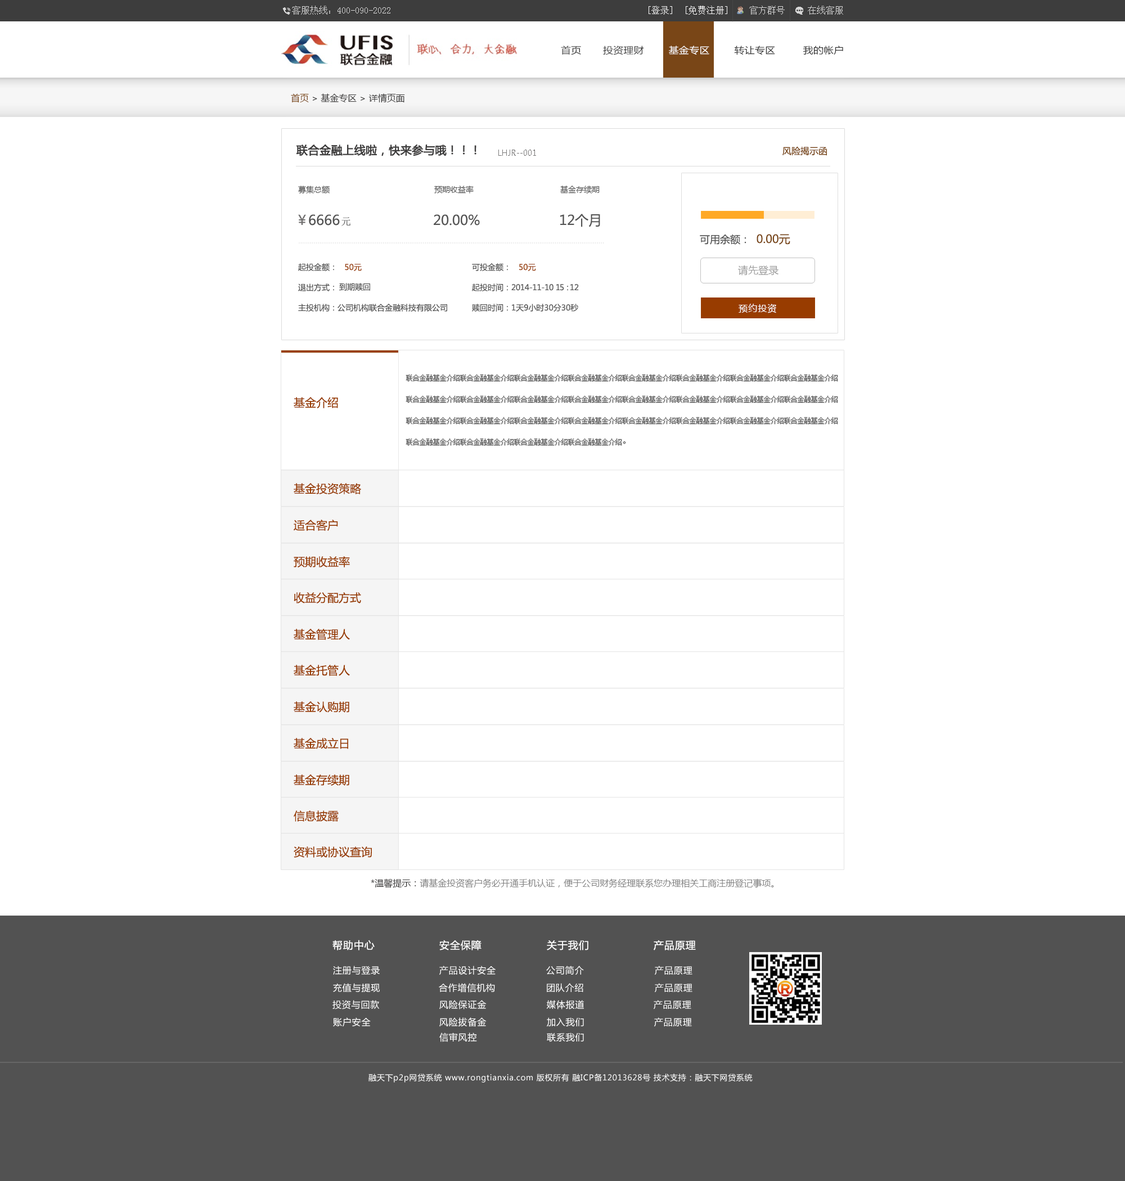
<style>
.page{position:relative;width:1125px;height:1181px;background:#ffffff}
.page>*{position:absolute;margin:0}
.t1{font:9px "SimSun";color:#d6d6d6}
.t2{font:9px "SimSun";color:#fefefe}
.t3{font:9px "SimSun";color:#fffefe}
.t4{font:9.1px "MicrosoftYaHei";letter-spacing:0.01em;color:#333333;scale:1.11 1}
.t5{font:9.1px "MicrosoftYaHei";letter-spacing:0.01em;color:#fffefe;scale:1.11 1}
.t6{font:9px "MicrosoftYaHei";color:#3b3a3a}
.t7{font:9px "MicrosoftYaHei";color:#794617}
.t8{font:11.2px "MicrosoftYaHei";color:#3d3c3c;font-weight:bold}
.t9{font:7.9px "MicrosoftYaHei";color:#797878}
.t10{font:7.9px "MicrosoftYaHei";color:#545454}
.t11{font:13.5px "MicrosoftYaHei";color:#706f6f}
.t12{font:13.5px "MicrosoftYaHei";color:#545454}
.t13{font:10.1px "SimSun";color:#545454}
.t14{font:10.1px "MicrosoftYaHei";color:#545454}
.t15{font:11.2px "MicrosoftYaHei";color:#794617}
.t16{font:7.9px "MicrosoftYaHei";color:#983c00}
.t17{font:10.1px "MicrosoftYaHei";color:#9d9d9d}
.t18{font:7.9px "MicrosoftYaHei";letter-spacing:-0.02em;color:#545454}
.t19{font:7.9px "MicrosoftYaHei";letter-spacing:-0.08em;color:#545454}
.t20{font:7.9px "MicrosoftYaHei";letter-spacing:-0.22em;color:#545454}
.t21{font:7.9px "MicrosoftYaHei";letter-spacing:0.12em;color:#545454}
.t22{font:9px "MicrosoftYaHei";letter-spacing:0.075em;color:#ffffff}
.t23{font:6.8px/21.4px "SimSun";color:#585858}
.t24{font:11.2px "MicrosoftYaHei";color:#983c00}
.t25{font:9px "MicrosoftYaHei";color:#858585}
.t26{font:9px "MicrosoftYaHei";color:#3a3939}
.t27{font:10.1px "MicrosoftYaHei";letter-spacing:0.05em;color:#ffffff}
.t28{font:9px "MicrosoftYaHei";letter-spacing:0.05em;color:#ffffff}
.t29{font:7.9px "MicrosoftYaHei";letter-spacing:0.05em;color:#ffffff}
</style>
<div class="page">
<p class="t1" style="left:292px;top:6px;width:98px;height:9px">客服热线：400-090-2022</p>
<p class="t2" style="left:649px;top:6px;width:23px;height:9px">[登录]</p>
<p class="t3" style="left:686px;top:6px;width:41px;height:9px">[免费注册]</p>
<p class="t1" style="left:749px;top:6px;width:94px;height:9px">官方群号     在线客服</p>
<p class="t4" style="left:561px;top:46px;width:282px;height:9px">首页       投资理财        <span class="t5">基金专区</span>        转让专区         我的帐户</p>
<p class="t6" style="left:291px;top:93px;width:114px;height:10px"><span class="t7">首页 </span>&gt; 基金专区 &gt; 详情页面</p>
<p class="t8" style="left:296px;top:144px;width:180px;height:12px">联合金融上线啦，快来参与哦！！！</p>
<p class="t9" style="left:498px;top:150px;width:38px;height:6px">LHJR--001</p>
<p class="t7" style="left:782px;top:146px;width:45px;height:10px">风险揭示函</p>
<p class="t10" style="left:298px;top:186px;width:32px;height:8px">募集总额</p>
<p class="t10" style="left:434px;top:186px;width:40px;height:8px">预期收益率</p>
<p class="t10" style="left:560px;top:186px;width:40px;height:8px">基金存续期</p>
<p class="t11" style="left:298px;top:214px;width:8px;height:11px">￥</p>
<p class="t12" style="left:309px;top:214px;width:31px;height:12px">6666</p>
<p class="t13" style="left:341px;top:217px;width:10px;height:9px">元</p>
<p class="t12" style="left:434px;top:214px;width:46px;height:12px">20.00%</p>
<p class="t12" style="left:560px;top:214px;width:40px;height:13px">12个月</p>
<p class="t14" style="left:700px;top:234px;width:90px;height:11px">可用余额：  <span class="t15">0.00元</span></p>
<p class="t10" style="left:298px;top:263px;width:64px;height:9px">起投金额：   <span class="t16">50元</span></p>
<p class="t10" style="left:472px;top:263px;width:36px;height:9px">可投金额：</p>
<p class="t16" style="left:519px;top:264px;width:17px;height:7px">50元</p>
<p class="t17" style="left:738px;top:265px;width:40px;height:11px">请先登录</p>
<p class="t10" style="left:298px;top:284px;width:36px;height:7px">退出方式：</p>
<p class="t10" style="left:339px;top:283px;width:31px;height:8px">到期赎回</p>
<p class="t18" style="left:472px;top:284px;width:107px;height:7px"><span class="t10">起投时间：</span>2014-11-10 <span class="t19">15</span><span class="t20">：</span>1<span class="t21">2</span></p>
<p class="t10" style="left:298px;top:304px;width:149px;height:8px">主投机构：公司机构联合金融科技有限公司</p>
<p class="t10" style="left:472px;top:304px;width:106px;height:8px">赎回时间：1天9小时30分30秒</p>
<p class="t22" style="left:739px;top:304px;width:37px;height:9px">预约投资</p>
<p class="t23" style="left:406px;top:375px;width:432px;height:71px">联合金融基金介绍联合金融基金介绍联合金融基金介绍联合金融基金介绍联合金融基金介绍联合金融基金介绍联合金融基金介绍联合金融基金介绍<br>联合金融基金介绍联合金融基金介绍联合金融基金介绍联合金融基金介绍联合金融基金介绍联合金融基金介绍联合金融基金介绍联合金融基金介绍<br>联合金融基金介绍联合金融基金介绍联合金融基金介绍联合金融基金介绍联合金融基金介绍联合金融基金介绍联合金融基金介绍联合金融基金介绍<br>联合金融基金介绍联合金融基金介绍联合金融基金介绍联合金融基金介绍。</p>
<p class="t24" style="left:294px;top:397px;width:44px;height:11px">基金介绍</p>
<p class="t24" style="left:294px;top:483px;width:67px;height:11px">基金投资策略</p>
<p class="t24" style="left:294px;top:520px;width:44px;height:11px">适合客户</p>
<p class="t24" style="left:294px;top:556px;width:56px;height:12px">预期收益率</p>
<p class="t24" style="left:294px;top:592px;width:67px;height:12px">收益分配方式</p>
<p class="t24" style="left:294px;top:629px;width:56px;height:11px">基金管理人</p>
<p class="t24" style="left:294px;top:665px;width:56px;height:11px">基金托管人</p>
<p class="t24" style="left:294px;top:701px;width:55px;height:12px">基金认购期</p>
<p class="t24" style="left:294px;top:738px;width:54px;height:11px">基金成立日</p>
<p class="t24" style="left:294px;top:775px;width:55px;height:11px">基金存续期</p>
<p class="t24" style="left:294px;top:811px;width:45px;height:11px">信息披露</p>
<p class="t24" style="left:294px;top:847px;width:78px;height:11px">资料或协议查询</p>
<p class="t25" style="left:371px;top:879px;width:403px;height:9px"><span class="t26">*温馨提示：</span>请基金投资客户务必开通手机认证，便于公司财务经理联系您办理相关工商注册登记事项。</p>
<p class="t27" style="left:332px;top:940px;width:43px;height:11px">帮助中心</p>
<p class="t27" style="left:439px;top:940px;width:43px;height:11px">安全保障</p>
<p class="t27" style="left:547px;top:940px;width:41px;height:11px">关于我们</p>
<p class="t27" style="left:654px;top:940px;width:42px;height:11px">产品原理</p>
<p class="t28" style="left:333px;top:966px;width:47px;height:9px">注册与登录</p>
<p class="t28" style="left:439px;top:966px;width:57px;height:9px">产品设计安全</p>
<p class="t28" style="left:546px;top:966px;width:38px;height:9px">公司简介</p>
<p class="t28" style="left:655px;top:966px;width:37px;height:9px">产品原理</p>
<p class="t28" style="left:333px;top:983px;width:47px;height:10px">充值与提现</p>
<p class="t28" style="left:439px;top:983px;width:56px;height:10px">合作增信机构</p>
<p class="t28" style="left:547px;top:983px;width:36px;height:10px">团队介绍</p>
<p class="t28" style="left:655px;top:983px;width:37px;height:10px">产品原理</p>
<p class="t28" style="left:332px;top:1000px;width:47px;height:10px">投资与回款</p>
<p class="t28" style="left:439px;top:1000px;width:48px;height:10px">风险保证金</p>
<p class="t28" style="left:546px;top:1000px;width:38px;height:10px">媒体报道</p>
<p class="t28" style="left:654px;top:1000px;width:37px;height:10px">产品原理</p>
<p class="t28" style="left:333px;top:1018px;width:38px;height:9px">账户安全</p>
<p class="t28" style="left:439px;top:1018px;width:48px;height:9px">风险拔备金</p>
<p class="t28" style="left:547px;top:1018px;width:37px;height:9px">加入我们</p>
<p class="t28" style="left:654px;top:1018px;width:38px;height:9px">产品原理</p>
<p class="t28" style="left:439px;top:1033px;width:38px;height:9px">信审风控</p>
<p class="t28" style="left:547px;top:1033px;width:37px;height:9px">联系我们</p>
<p class="t29" style="left:368px;top:1074px;width:385px;height:9px">融天下p2p网贷系统 www.rongtianxia.com 版权所有 融ICP备12013628号 技术支持：融天下网贷系统</p>
</div>
